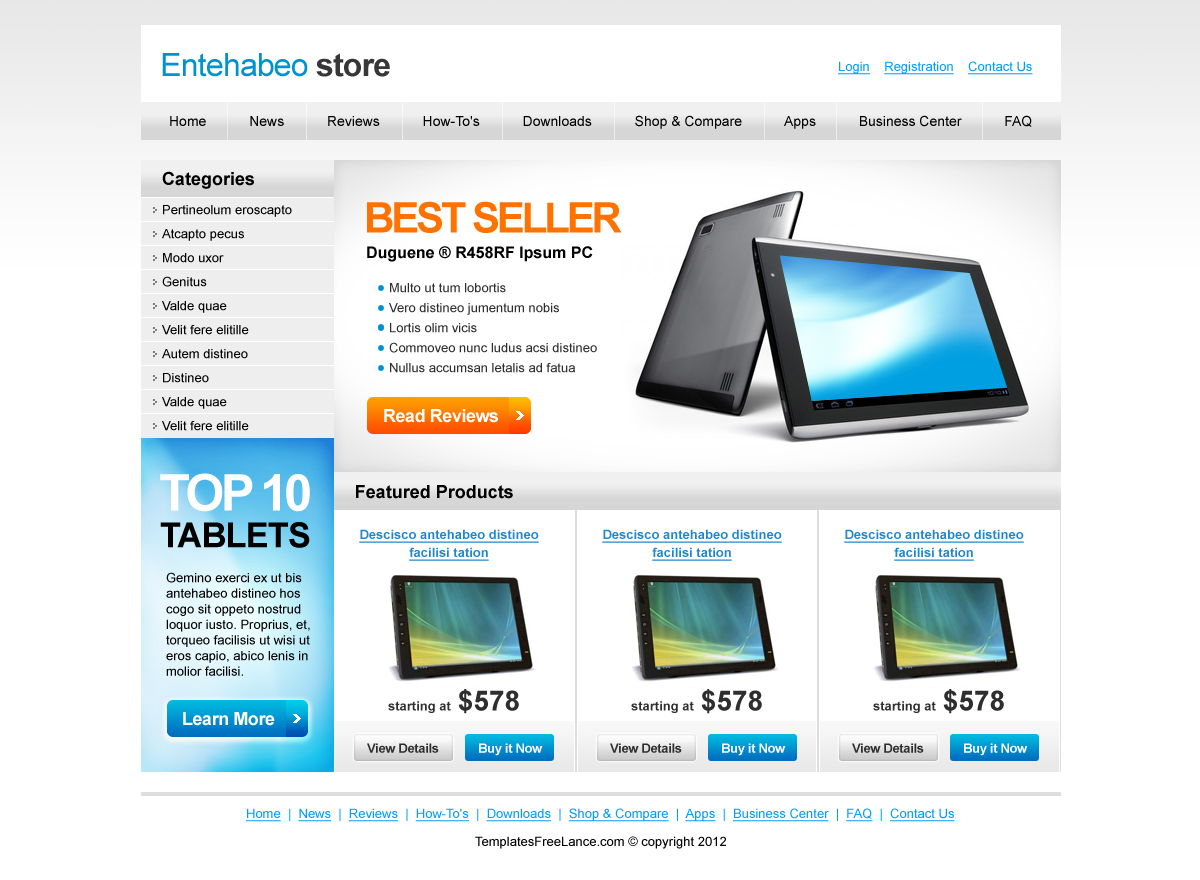
<style>
.page{position:relative;width:1200px;height:880px;background:#ffffff}
.page>*{position:absolute;margin:0}
.t1{font:32px "ArialMT";letter-spacing:-0.025em;color:#0092cf}
.t2{font:32px "Arial-BoldMT";letter-spacing:-0.025em;color:#373737}
.t3{font:13px "ArialMT";color:#009eff;text-decoration:underline}
.t4{font:14px "ArialMT";color:#000000}
.t5{font:18px "Arial-BoldMT";color:#000000}
.t6{font:13px/24px "ArialMT";color:#000000}
.t7{font:42px "Arial-BoldMT";letter-spacing:-0.075em;color:#ff7200;text-transform:uppercase}
.t8{font:16px "Arial-BoldMT";color:#000000}
.t9{font:13px/20px "ArialMT";color:#2e2e2e}
.t10{font:18px "Arial-BoldMT";letter-spacing:-0.025em;color:#ffffff}
.t11{font:50.5px "Arial-BoldMT";letter-spacing:-0.075em;color:#ffffff;text-transform:uppercase}
.t12{font:34.4px "Arial-BoldMT";letter-spacing:-0.025em;color:#000000;text-transform:uppercase}
.t13{font:13px/18px "Arial-BoldMT";color:#1e87d2;text-decoration:underline}
.t14{font:13px "ArialMT";color:#000000}
.t15{font:13px "Arial-BoldMT";color:#2e2e2e}
.t16{font:28px "Arial-BoldMT";color:#2e2e2e}
.t17{font:13px "Arial-BoldMT";letter-spacing:-0.025em;color:#2e2e2e}
.t18{font:13px "Arial-BoldMT";letter-spacing:-0.025em;color:#ffffff}
.t19{font:13px "ArialMT";color:#009eff}
</style>
<div class="page">
<p class="t1" style="left:162px;top:53px;width:228px;height:24px">Entehabeo <span class="t2">store</span></p>
<p class="t3" style="left:838px;top:61px;width:195px;height:14px">Login    Registration    Contact Us</p>
<p class="t4" style="left:170px;top:115px;width:862px;height:14px">Home           News           Reviews           How-To's           Downloads           Shop &amp; Compare           Apps           Business Center           FAQ</p>
<p class="t5" style="left:162px;top:171px;width:92px;height:18px">Categories</p>
<p class="t6" style="left:162px;top:205px;width:130px;height:226px">Pertineolum eroscapto<br>Atcapto pecus<br>Modo uxor<br>Genitus<br>Valde quae<br>Velit fere elitille<br>Autem distineo<br>Distineo<br>Valde quae<br>Velit fere elitille</p>
<p class="t7" style="left:367px;top:201px;width:255px;height:32px">Best seller</p>
<p class="t8" style="left:367px;top:246px;width:226px;height:16px">Duguene ® R458RF Ipsum PC</p>
<p class="t9" style="left:389px;top:283px;width:208px;height:90px">Multo ut tum lobortis<br>Vero distineo jumentum nobis<br>Lortis olim vicis<br>Commoveo nunc ludus acsi distineo<br>Nullus accumsan letalis ad fatua</p>
<p class="t10" style="left:384px;top:409px;width:114px;height:14px">Read Reviews</p>
<p class="t11" style="left:160px;top:473px;width:150px;height:39px">top 10</p>
<p class="t5" style="left:356px;top:485px;width:157px;height:14px">Featured Products</p>
<p class="t12" style="left:160px;top:522px;width:150px;height:26px">Tablets</p>
<p class="t13" style="left:359px;top:529px;width:180px;height:32px;text-align:center">Descisco antehabeo distineo<br>facilisi tation</p>
<p class="t13" style="left:602px;top:529px;width:180px;height:32px;text-align:center">Descisco antehabeo distineo<br>facilisi tation</p>
<p class="t13" style="left:844px;top:529px;width:180px;height:32px;text-align:center">Descisco antehabeo distineo<br>facilisi tation</p>
<p class="t14" style="left:166px;top:572px;width:144px;height:104px">Gemino exerci ex ut bis antehabeo distineo hos cogo sit oppeto nostrud loquor iusto. Proprius, et, torqueo facilisis ut wisi ut eros capio, abico lenis in molior facilisi.</p>
<p class="t15" style="left:388px;top:689px;width:131px;height:25px">starting at <span class="t16">$578</span></p>
<p class="t15" style="left:631px;top:689px;width:131px;height:25px">starting at <span class="t16">$578</span></p>
<p class="t15" style="left:873px;top:689px;width:131px;height:25px">starting at <span class="t16">$578</span></p>
<p class="t10" style="left:183px;top:712px;width:92px;height:14px">Learn More</p>
<p class="t17" style="left:367px;top:743px;width:72px;height:10px">View Details</p>
<p class="t18" style="left:479px;top:743px;width:64px;height:13px">Buy it Now</p>
<p class="t17" style="left:610px;top:743px;width:72px;height:10px">View Details</p>
<p class="t18" style="left:722px;top:743px;width:64px;height:13px">Buy it Now</p>
<p class="t17" style="left:852px;top:743px;width:72px;height:10px">View Details</p>
<p class="t18" style="left:964px;top:743px;width:64px;height:13px">Buy it Now</p>
<p class="t3" style="left:246px;top:808px;width:709px;height:14px">Home<span class="t19">  |  </span>News<span class="t19">  |  </span>Reviews<span class="t19">  |  </span>How-To's<span class="t19">  |  </span>Downloads<span class="t19">  |  </span>Shop &amp; Compare<span class="t19">  |  </span>Apps<span class="t19">  |  </span>Business Center<span class="t19">  |  </span>FAQ<span class="t19">  |  </span>Contact Us</p>
<p class="t14" style="left:475px;top:836px;width:251px;height:13px">TemplatesFreeLance.com © copyright 2012</p>
</div>
